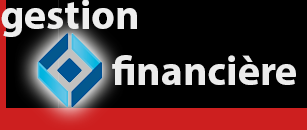
<style>
.page{position:relative;width:307px;height:130px;background:#000000}
.page>*{position:absolute;margin:0}
.t1{font:41.7px "MyriadPro-Bold";color:#eeeeee}
.t2{font:41.7px "MyriadPro-Bold";color:#ebebeb}
</style>
<div class="page">
<p class="t1" style="left:1px;top:0px;width:136px;height:37px">gestion</p>
<p class="t2" style="left:112px;top:55px;width:184px;height:30px">financière</p>
</div>
